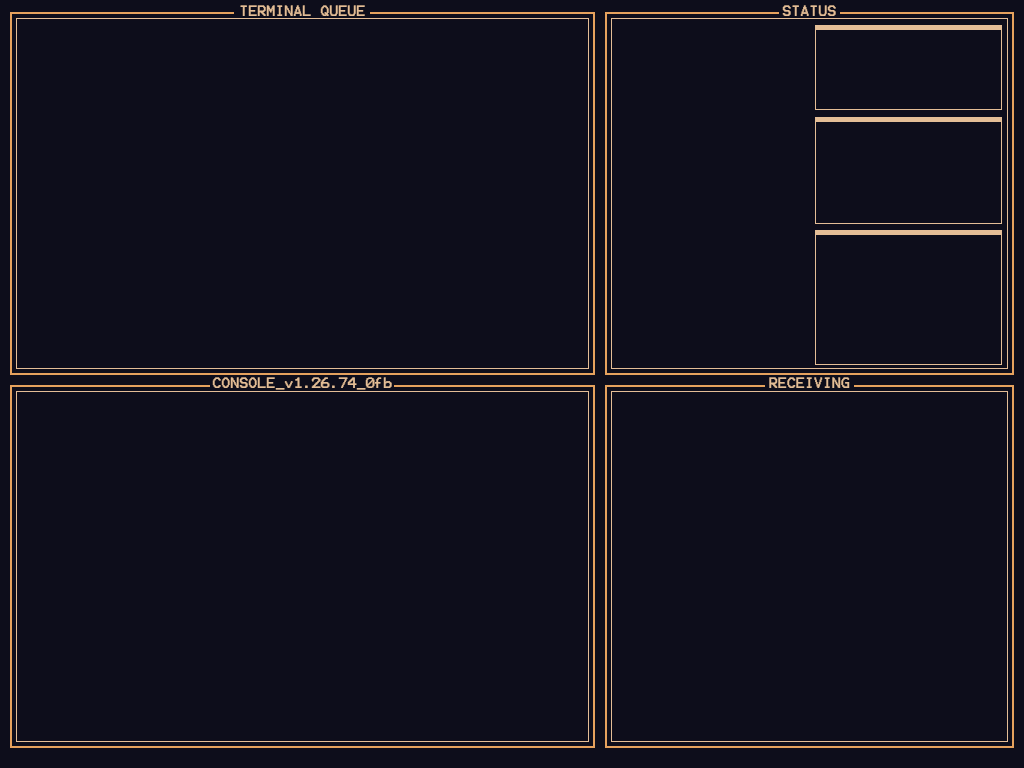
<style>
.page{position:relative;width:1024px;height:768px;background:#0d0d1b}
.page>*{position:absolute;margin:0}
.t1{font:12px "Terminal";color:#e3bd96}
</style>
<div class="page">
<p class="t1" style="left:240px;top:5px;width:125px;height:11px">TERMINAL QUEUE</p>
<p class="t1" style="left:782px;top:5px;width:54px;height:11px">STATUS</p>
<p class="t1" style="left:212px;top:377px;width:180px;height:13px">CONSOLE_v1.26.74_0fb</p>
<p class="t1" style="left:769px;top:377px;width:81px;height:11px">RECEIVING</p>
</div>
